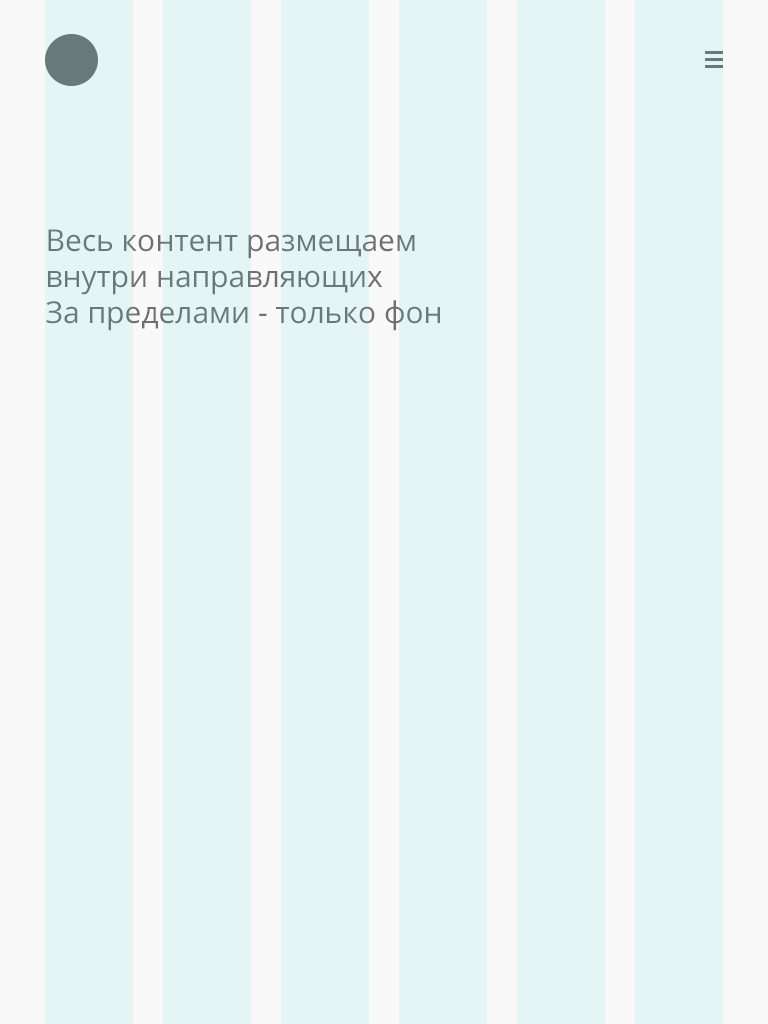
<style>
.page{position:relative;width:768px;height:1024px;background:#e5f4f4}
.page>*{position:absolute;margin:0}
.t1{font:30px/36px "OpenSans";color:#6f6f6f}
</style>
<div class="page">
<p class="t1" style="left:46px;top:229px;width:394px;height:102px">Весь контент размещаем внутри направляющих<br>За пределами - только фон</p>
</div>
